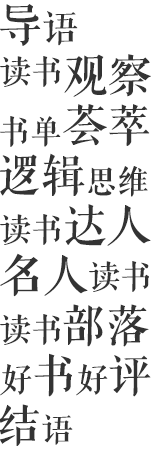
<style>
.page{position:relative;width:160px;height:450px;background:#ffffff}
.page>*{position:absolute;margin:0}
.t1{font:44px "FZQKBYSJW--GB1-0";color:#333333}
.t2{font:36px "FZQKBYSJW--GB1-0";color:#333333}
.t3{font:32px "FZQKBYSJW--GB1-0";color:#333333}
</style>
<div class="page">
<p class="t1" style="left:0px;top:4px;width:78px;height:42px">导<span class="t2">语</span></p>
<p class="t1" style="left:64px;top:54px;width:87px;height:43px">观察</p>
<p class="t3" style="left:0px;top:56px;width:60px;height:31px">读书</p>
<p class="t1" style="left:63px;top:104px;width:87px;height:42px">荟萃</p>
<p class="t3" style="left:0px;top:116px;width:61px;height:31px">书单</p>
<p class="t1" style="left:0px;top:153px;width:85px;height:43px">逻辑</p>
<p class="t3" style="left:88px;top:166px;width:60px;height:31px">思维</p>
<p class="t1" style="left:65px;top:204px;width:86px;height:42px">达人</p>
<p class="t3" style="left:0px;top:214px;width:60px;height:31px">读书</p>
<p class="t1" style="left:0px;top:253px;width:88px;height:44px">名人</p>
<p class="t3" style="left:89px;top:261px;width:60px;height:31px">读书</p>
<p class="t1" style="left:63px;top:304px;width:86px;height:43px">部落</p>
<p class="t3" style="left:0px;top:314px;width:60px;height:31px">读书</p>
<p class="t3" style="left:0px;top:353px;width:151px;height:44px">好<span class="t1">书</span>好<span class="t1">评</span></p>
<p class="t1" style="left:0px;top:404px;width:73px;height:42px">结<span class="t3">语</span></p>
</div>
